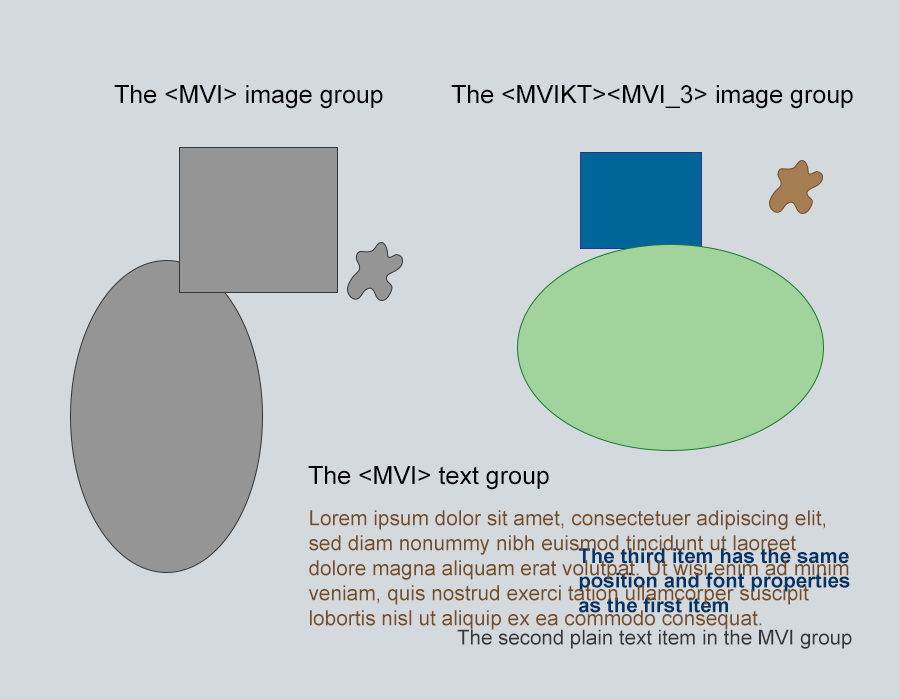
<style>
.page{position:relative;width:900px;height:699px;background:#d4d9dd}
.page>*{position:absolute;margin:0}
.t1{font:25px "ArialMT";color:#000000}
.t2{font:20.8px "ArialMT";color:#754c24}
.t3{font:20.5px "Arial-BoldMT";color:#003366}
.t4{font:20.5px "ArialMT";color:#363636}
</style>
<div class="page">
<p class="t1" style="left:114px;top:85px;width:269px;height:24px">The &lt;MVI&gt; image group</p>
<p class="t1" style="left:451px;top:85px;width:402px;height:24px">The &lt;MVIKT&gt;&lt;MVI_3&gt; image group</p>
<p class="t1" style="left:308px;top:466px;width:241px;height:24px">The &lt;MVI&gt; text group</p>
<p class="t2" style="left:308px;top:510px;width:541px;height:120px">Lorem ipsum dolor sit amet, consectetuer adipiscing elit, sed diam nonummy nibh euismod tincidunt ut laoreet dolore magna aliquam erat volutpat. Ut wisi enim ad minim veniam, quis nostrud exerci tation ullamcorper suscipit lobortis nisl ut aliquip ex ea commodo consequat.</p>
<p class="t3" style="left:578px;top:548px;width:272px;height:65px">The third item has the same<br>position and font properties<br>as the first item</p>
<p class="t4" style="left:457px;top:629px;width:395px;height:20px">The second plain text item in the MVI group</p>
</div>
